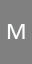
<style>
.page{position:relative;width:32px;height:64px;background:#808080}
.page>*{position:absolute;margin:0}
.t1{font:24px "Calibri";color:#feffff}
</style>
<div class="page">
<p class="t1" style="left:7px;top:24px;width:18px;height:15px">M</p>
</div>
